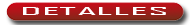
<style>
.page{position:relative;width:190px;height:25px}
.page>*{position:absolute;margin:0}
.t1{font:11.4px "AgencyFB-Reg";color:#ffffff;scale:4.37 1}
</style>
<div class="page">
<p class="t1" style="left:23px;top:7px;width:143px;height:8px">DETALLES</p>
</div>
